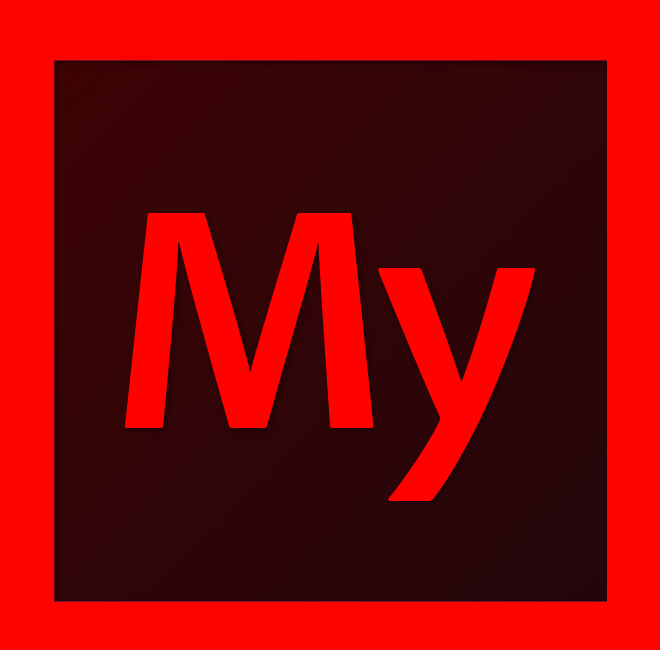
<style>
.page{position:relative;width:660px;height:650px;background:#ff0300}
.page>*{position:absolute;margin:0}
.t1{font:329.2px "AdobeClean-Bold";letter-spacing:-0.04em;color:#ff0200}
</style>
<div class="page">
<p class="t1" style="left:124px;top:213px;width:412px;height:288px">My</p>
</div>
